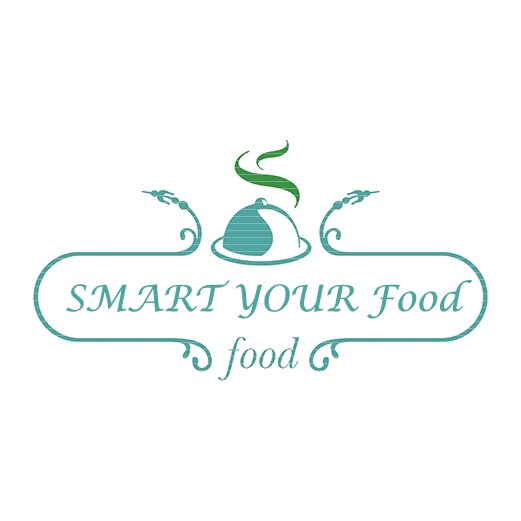
<style>
.page{position:relative;width:521px;height:521px;background:#ffffff}
.page>*{position:absolute;margin:0}
.t1{font:36px "LucidaCalligraphy-Italic";color:#4da6a0}
</style>
<div class="page">
<p class="t1" style="left:66px;top:280px;width:407px;height:39px">SMART YOUR Food</p>
</div>
